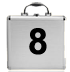
<style>
.page{position:relative;width:70px;height:72px;background:#ffffff}
.page>*{position:absolute;margin:0}
.t1{font:36px "Arial-BoldMT";color:#000000}
</style>
<div class="page">
<p class="t1" style="left:29px;top:28px;width:18px;height:27px">8</p>
</div>
